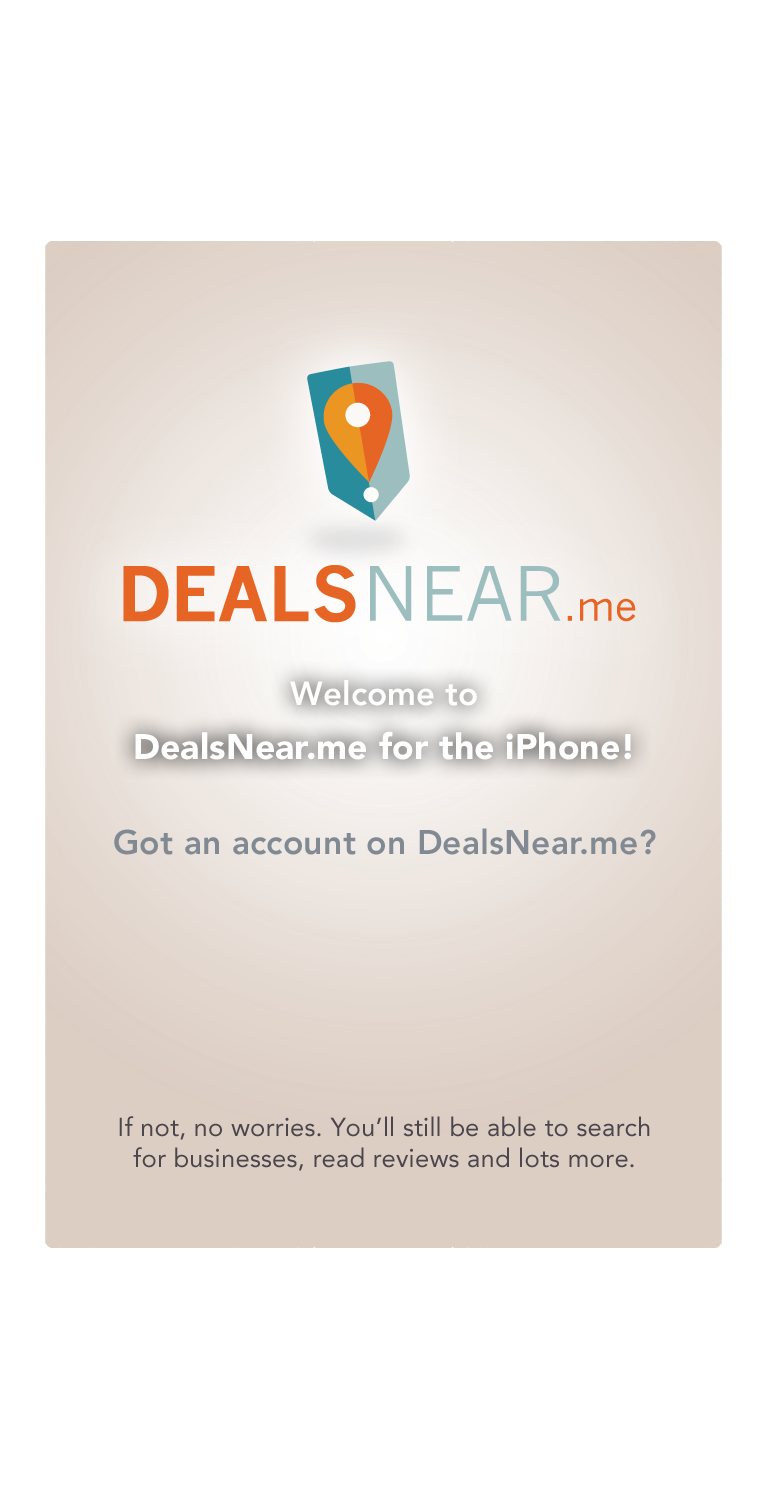
<style>
.page{position:relative;width:759px;height:1487px;background:#ffffff}
.page>*{position:absolute;margin:0}
.t1{font:35.4px/39.2px "Avenir-Black";letter-spacing:0.005em;color:#ffffff}
.t2{font:33.2px "Avenir-Heavy";letter-spacing:0.005em;color:#ffffff}
.t3{font:35.4px/53.5px "Avenir-Black";letter-spacing:0.005em;color:#ffffff}
.t4{font:33.8px "Avenir-Heavy";letter-spacing:0.005em;color:#818a93}
.t5{font:25.8px "Avenir-Roman";letter-spacing:0.005em;color:#4b464d}
</style>
<div class="page">
<p class="t1" style="left:135px;top:680px;width:496px;height:80px;text-align:center"><span class="t2">Welcome to<br></span><span class="t3">DealsNear.me </span>for the iPhone!</p>
<p class="t4" style="left:114px;top:828px;width:542px;height:27px">Got an account on DealsNear.me?</p>
<p class="t5" style="left:119px;top:1116px;width:531px;height:55px;text-align:center">If not, no worries. You’ll still be able to search for businesses, read reviews and lots more.</p>
</div>
